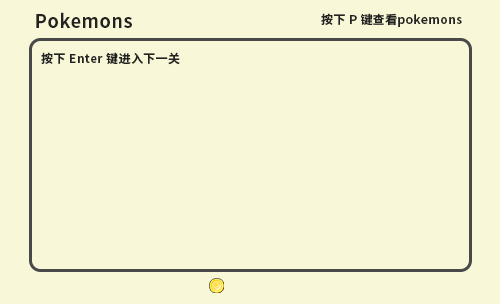
<style>
.page{position:relative;width:500px;height:304px;background:#f8f7d8}
.page>*{position:absolute;margin:0}
.t1{font:18px "SourceHanSansCN-Bold";letter-spacing:0.03em;color:#222222}
.t2{font:12px "SourceHanSansCN-Bold";letter-spacing:0.03em;color:#222222}
</style>
<div class="page">
<p class="t1" style="left:36px;top:12px;width:96px;height:16px">Pokemons</p>
<p class="t2" style="left:321px;top:13px;width:141px;height:14px">按下 P 键查看pokemons</p>
<p class="t2" style="left:41px;top:52px;width:139px;height:13px">按下 Enter 键进入下一关</p>
</div>
